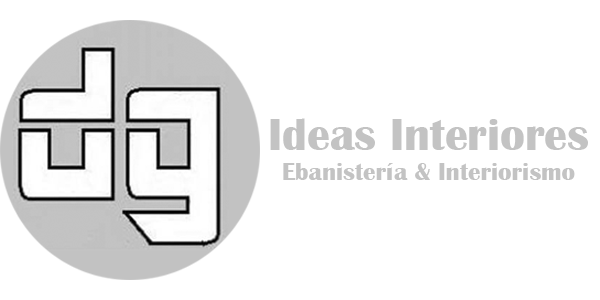
<style>
.page{position:relative;width:600px;height:300px;background:#ffffff}
.page>*{position:absolute;margin:0}
.t1{font:25px "BritannicBold";color:#c3c3c3}
.t2{font:45.8px "BritannicBold";color:#c3c3c3}
</style>
<div class="page">
<p class="t1" style="left:270px;top:118px;width:318px;height:62px;text-align:center"><span class="t2">Ideas Interiores<br></span>Ebanistería &amp; Interiorismo</p>
</div>
